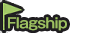
<style>
.page{position:relative;width:87px;height:33px;background:#ffffff}
.page>*{position:absolute;margin:0}
.t1{font:14px "GothicMB101Pro-DeBold";letter-spacing:-0.04em;color:#9dc061}
</style>
<div class="page">
<p class="t1" style="left:8px;top:17px;width:59px;height:14px">Flagship</p>
</div>
